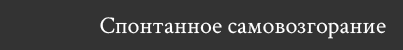
<style>
.page{position:relative;width:403px;height:50px;background:#333333}
.page>*{position:absolute;margin:0}
.t1{font:24px "CrimsonText-Regular";color:#ffffff}
</style>
<div class="page">
<p class="t1" style="left:100px;top:17px;width:286px;height:22px">Спонтанное самовозгорание</p>
</div>
